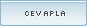
<style>
.page{position:relative;width:87px;height:26px}
.page>*{position:absolute;margin:0}
.t1{font:9px "Silkscreen";color:#444444}
</style>
<div class="page">
<p class="t1" style="left:25px;top:11px;width:40px;height:5px">cevapla</p>
</div>
